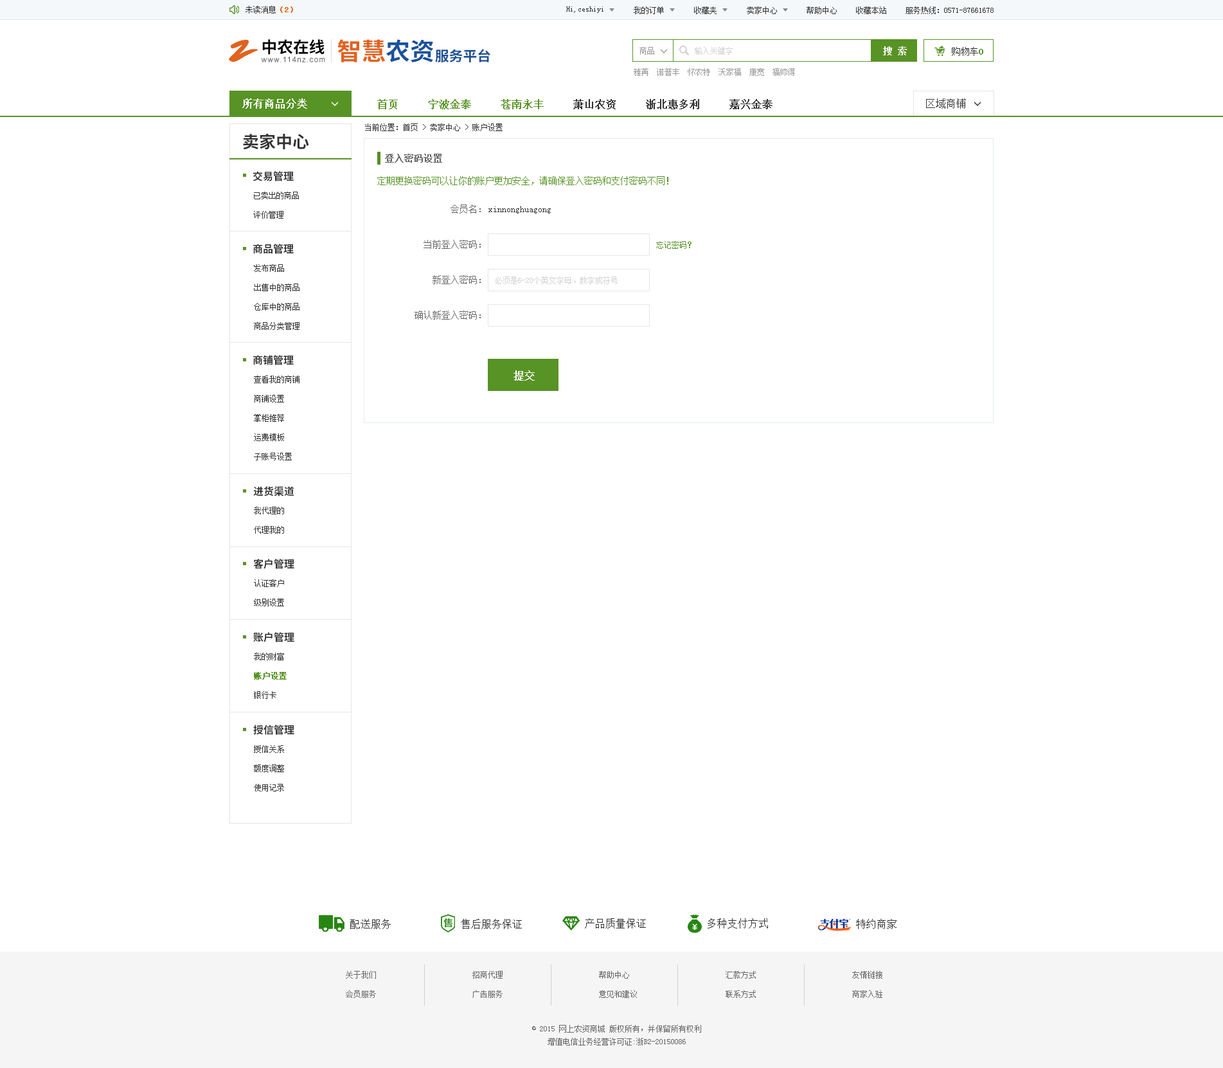
<style>
.page{position:relative;width:1223px;height:1068px;background:#ffffff}
.page>*{position:absolute;margin:0}
.t1{font:7.7px "SimSun";color:#333333}
.t2{font:7.7px "SimSun";color:#e0631f;font-weight:bold}
.t3{font:32.6px "SmudgerLetPlain";color:#e0631f}
.t4{font:15.9px "SourceHanSansCN-Bold";color:#060001}
.t5{font:24.3px "SourceHanSansCN-Bold";color:#e0631f}
.t6{font:24.3px "SourceHanSansCN-Bold";color:#1a529c}
.t7{font:14px "SourceHanSansCN-Bold";color:#194f93}
.t8{font:7.7px "SimSun";color:#999999}
.t9{font:7.7px "SimSun";color:#d1d1d1}
.t10{font:9px "SimSun";color:#ffffff;font-weight:bold}
.t11{font:9px "SimSun";color:#333333}
.t12{font:9px "SimSun";color:#589325;font-weight:bold}
.t13{font:7.6px "ArialMT";letter-spacing:0.1em;color:#585859}
.t14{font:10.3px "SimSun";color:#ffffff;font-weight:bold}
.t15{font:10.3px "SimSun";color:#333333;font-weight:bold}
.t16{font:10.3px "SimSun";color:#589325;font-weight:bold}
.t17{font:10.3px "SimSun";color:#333333}
.t18{font:16.7px "SourceHanSansCN-Bold";color:#333333}
.t19{font:9px "SimSun";color:#666666;font-weight:bold}
.t20{font:10.3px "SourceHanSansCN-Bold";color:#333333}
.t21{font:9px "SimSun";color:#589325}
.t22{font:7.7px/19.3px "SimSun";color:#333333}
.t23{font:9px "SimSun";color:#666666}
.t24{font:7.7px "SimSun";color:#589325}
.t25{font:7.7px/19.3px "SimSun";color:#589325;font-weight:bold}
.t26{font:7.7px/19.3px "SimSun";color:#666666}
.t27{font:7.7px/12.9px "SimSun";color:#666666}
</style>
<div class="page">
<p class="t1" style="left:246px;top:6px;width:47px;height:8px">未读消息<span class="t2">（2）</span></p>
<p class="t1" style="left:566px;top:6px;width:38px;height:7px">Hi,ceshiyi</p>
<p class="t1" style="left:634px;top:6px;width:30px;height:8px">我的订单</p>
<p class="t1" style="left:694px;top:6px;width:23px;height:8px">收藏夹</p>
<p class="t1" style="left:747px;top:6px;width:30px;height:8px">卖家中心</p>
<p class="t1" style="left:807px;top:6px;width:30px;height:8px">帮助中心</p>
<p class="t1" style="left:856px;top:6px;width:31px;height:8px">收藏本站</p>
<p class="t1" style="left:906px;top:6px;width:88px;height:8px">服务热线：0571-87661678</p>
<p class="t3" style="left:229px;top:39px;width:29px;height:23px">Z</p>
<p class="t4" style="left:262px;top:39px;width:63px;height:16px">中农在线</p>
<p class="t5" style="left:338px;top:39px;width:96px;height:23px">智慧<span class="t6">农资</span></p>
<p class="t7" style="left:435px;top:49px;width:56px;height:13px">服务平台</p>
<p class="t8" style="left:640px;top:47px;width:14px;height:8px">商品</p>
<p class="t9" style="left:695px;top:47px;width:38px;height:8px">输入关键字</p>
<p class="t10" style="left:883px;top:46px;width:24px;height:9px">搜 索</p>
<p class="t11" style="left:952px;top:47px;width:32px;height:9px">购物车<span class="t12">0</span></p>
<p class="t13" style="left:261px;top:57px;width:64px;height:5px">www.114nz.com</p>
<p class="t8" style="left:634px;top:68px;width:161px;height:8px">雅苒  诺普丰  怀农特  沃家福  康宽  福帅得</p>
<p class="t14" style="left:242px;top:98px;width:65px;height:11px">所有商品分类</p>
<p class="t15" style="left:377px;top:99px;width:396px;height:10px"><span class="t16">首页     宁波金泰     苍南永丰    </span> 萧山农资     浙北惠多利     嘉兴金泰</p>
<p class="t17" style="left:926px;top:98px;width:40px;height:11px">区域商铺</p>
<p class="t1" style="left:365px;top:123px;width:138px;height:8px">当前位置：首页 &gt; 卖家中心 &gt; 账户设置</p>
<p class="t18" style="left:243px;top:133px;width:66px;height:17px">卖家中心</p>
<p class="t19" style="left:385px;top:154px;width:57px;height:9px">登入密码设置</p>
<p class="t20" style="left:253px;top:171px;width:41px;height:10px">交易管理</p>
<p class="t21" style="left:377px;top:176px;width:292px;height:9px">定期更换密码可以让你的账户更加安全，请确保登入密码和支付密码不同！</p>
<p class="t22" style="left:253px;top:192px;width:46px;height:27px">已卖出的商品<br>评价管理</p>
<p class="t23" style="left:451px;top:204px;width:30px;height:9px">会员名：</p>
<p class="t11" style="left:489px;top:206px;width:62px;height:7px">xinnonghuagong</p>
<p class="t20" style="left:253px;top:244px;width:41px;height:10px">商品管理</p>
<p class="t23" style="left:424px;top:240px;width:57px;height:9px">当前登入密码：</p>
<p class="t24" style="left:656px;top:241px;width:36px;height:8px">忘记密码？</p>
<p class="t22" style="left:254px;top:264px;width:46px;height:66px">发布商品<br>出售中的商品<br>仓库中的商品<br>商品分类管理</p>
<p class="t23" style="left:433px;top:275px;width:48px;height:9px">新登入密码：</p>
<p class="t9" style="left:495px;top:276px;width:123px;height:8px">必须是6-20个英文字母、数字或符号</p>
<p class="t23" style="left:415px;top:310px;width:66px;height:10px">确认新登入密码：</p>
<p class="t20" style="left:253px;top:355px;width:41px;height:10px">商铺管理</p>
<p class="t22" style="left:254px;top:375px;width:46px;height:85px">查看我的商铺<br>商铺设置<br>掌柜推荐<br>运费模板<br>子账号设置</p>
<p class="t14" style="left:514px;top:370px;width:21px;height:11px">提交</p>
<p class="t20" style="left:253px;top:486px;width:41px;height:10px">进货渠道</p>
<p class="t22" style="left:254px;top:507px;width:30px;height:27px">我代理的<br>代理我的</p>
<p class="t20" style="left:253px;top:559px;width:41px;height:10px">客户管理</p>
<p class="t22" style="left:254px;top:579px;width:30px;height:27px">认证客户<br>级别设置</p>
<p class="t20" style="left:253px;top:632px;width:41px;height:10px">账户管理</p>
<p class="t22" style="left:254px;top:652px;width:33px;height:47px">我的财富<br><span class="t25">账户设置<br></span>银行卡</p>
<p class="t20" style="left:253px;top:724px;width:41px;height:11px">授信管理</p>
<p class="t22" style="left:254px;top:745px;width:30px;height:46px">授信关系<br>额度调整<br>使用记录</p>
<p class="t17" style="left:350px;top:919px;width:41px;height:10px">配送服务</p>
<p class="t17" style="left:461px;top:919px;width:61px;height:10px">售后服务保证</p>
<p class="t17" style="left:585px;top:918px;width:61px;height:10px">产品质量保证</p>
<p class="t17" style="left:708px;top:918px;width:60px;height:10px">多种支付方式</p>
<p class="t17" style="left:856px;top:919px;width:41px;height:10px">特约商家</p>
<p class="t26" style="left:346px;top:971px;width:30px;height:27px">关于我们<br>会员服务</p>
<p class="t26" style="left:473px;top:971px;width:30px;height:27px">招商代理<br>广告服务</p>
<p class="t26" style="left:599px;top:971px;width:38px;height:27px">帮助中心<br>意见和建议</p>
<p class="t26" style="left:726px;top:971px;width:30px;height:27px">汇款方式<br>联系方式</p>
<p class="t26" style="left:852px;top:971px;width:31px;height:27px">友情链接<br>商家入驻</p>
<p class="t27" style="left:532px;top:1025px;width:169px;height:20px;text-align:center">© 2015 网上农资商城 版权所有，并保留所有权利<br>增值电信业务经营许可证:浙B2-20150086</p>
</div>
